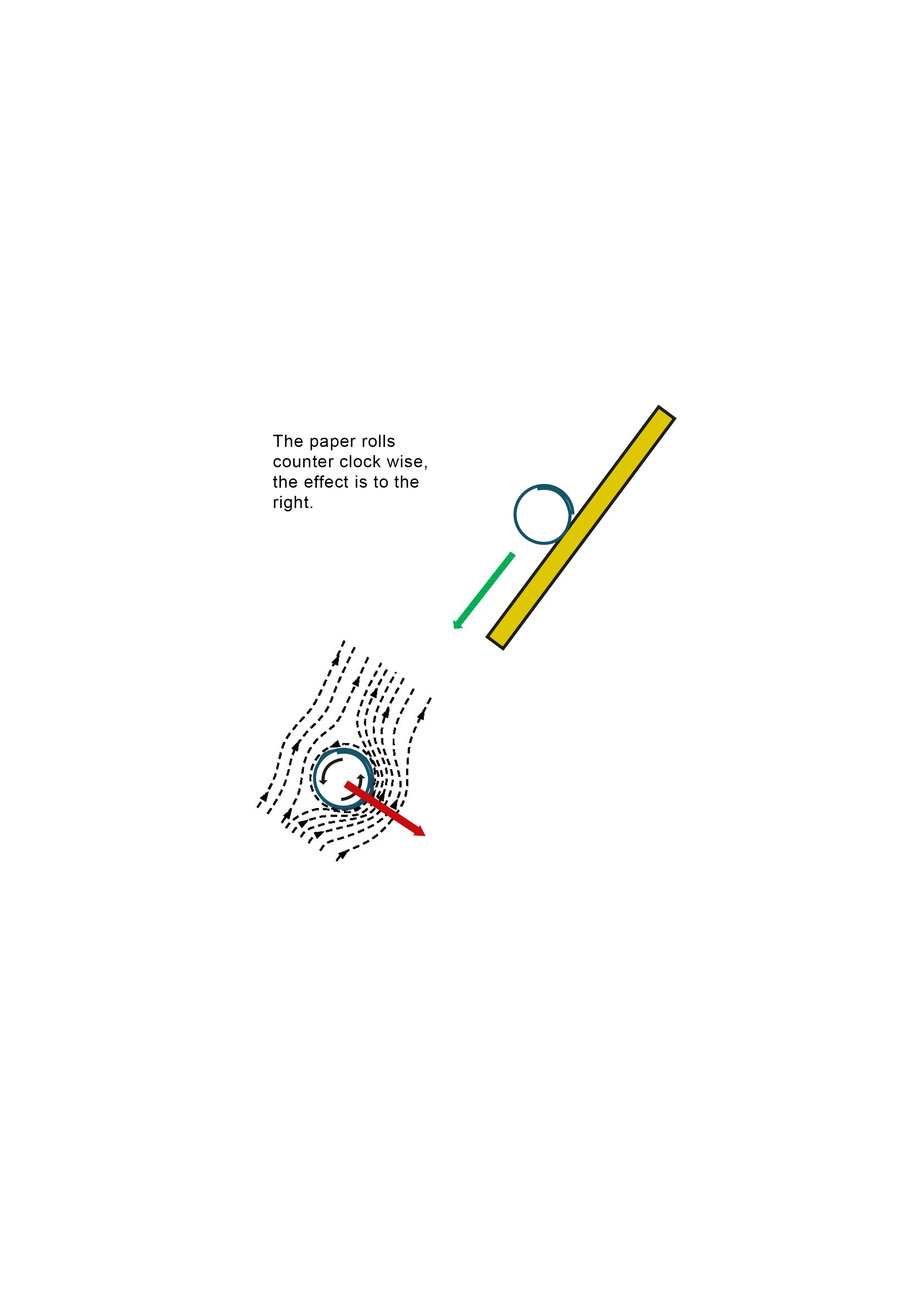
<style>
.page{position:relative;width:918px;height:1299px;background:#ffffff}
.page>*{position:absolute;margin:0}
.t1{font:17px "ArialMT";letter-spacing:0.04em;color:#000000}
</style>
<div class="page">
<p class="t1" style="left:273px;top:435px;width:154px;height:76px">The paper rolls counter clock wise, the effect is to the right.</p>
</div>
